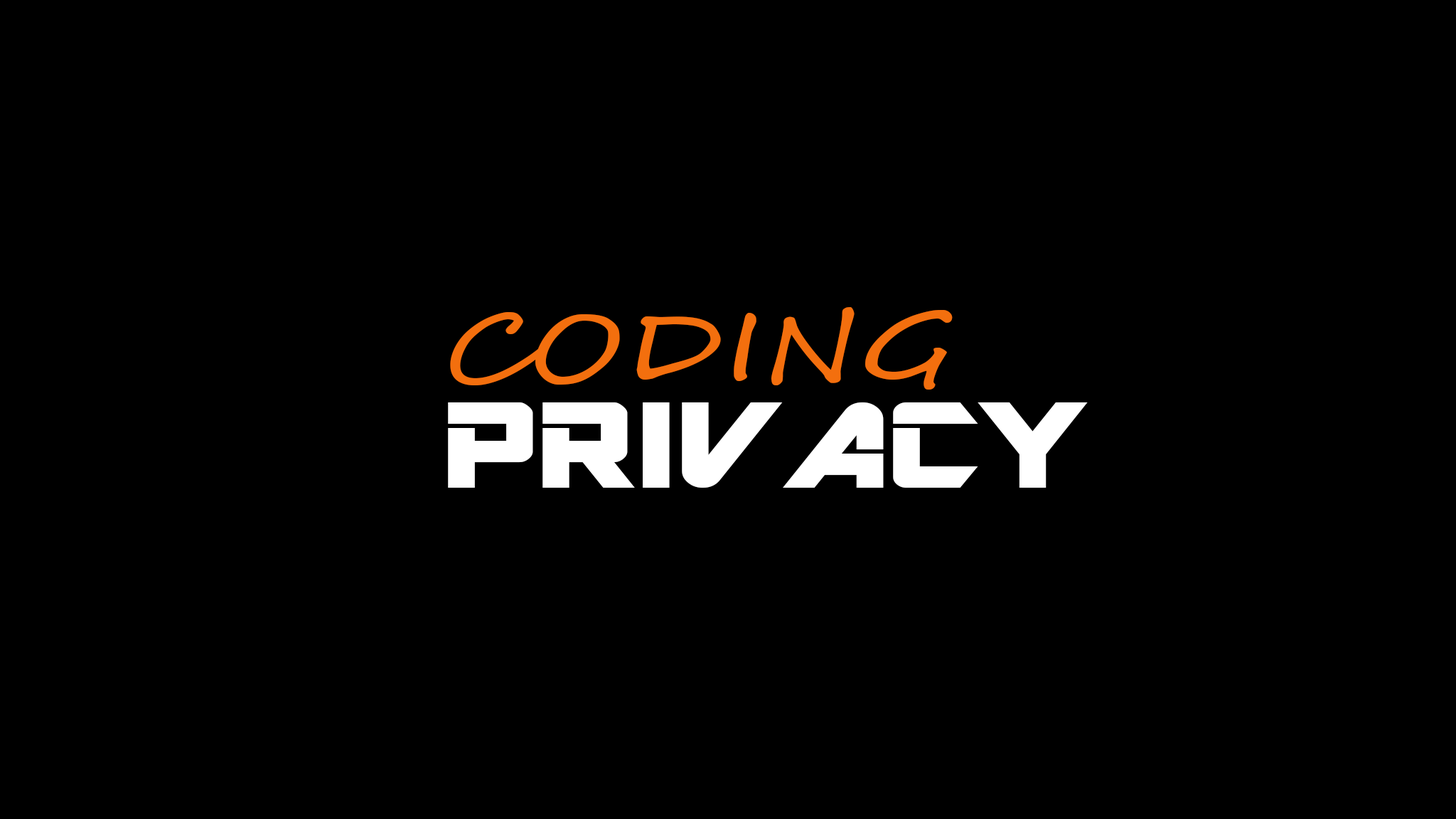
<style>
.page{position:relative;width:1456px;height:819px;background:#000000}
.page>*{position:absolute;margin:0}
.t1{font:94.8px "SegoeScript";color:#f36f0e;scale:1.24 1}
.t2{font:135.3px "ARDESTINE";color:#ffffff;scale:1.24 1}
</style>
<div class="page">
<p class="t1" style="left:450px;top:307px;width:503px;height:83px">CODING</p>
<p class="t2" style="left:448px;top:402px;width:640px;height:86px">PRIVACY</p>
</div>
